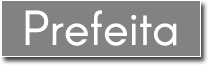
<style>
.page{position:relative;width:208px;height:65px;background:#828282}
.page>*{position:absolute;margin:0}
.t1{font:48px "Arcon-Regular";color:#ffffff}
</style>
<div class="page">
<p class="t1" style="left:25px;top:10px;width:152px;height:36px">Prefeita</p>
</div>
